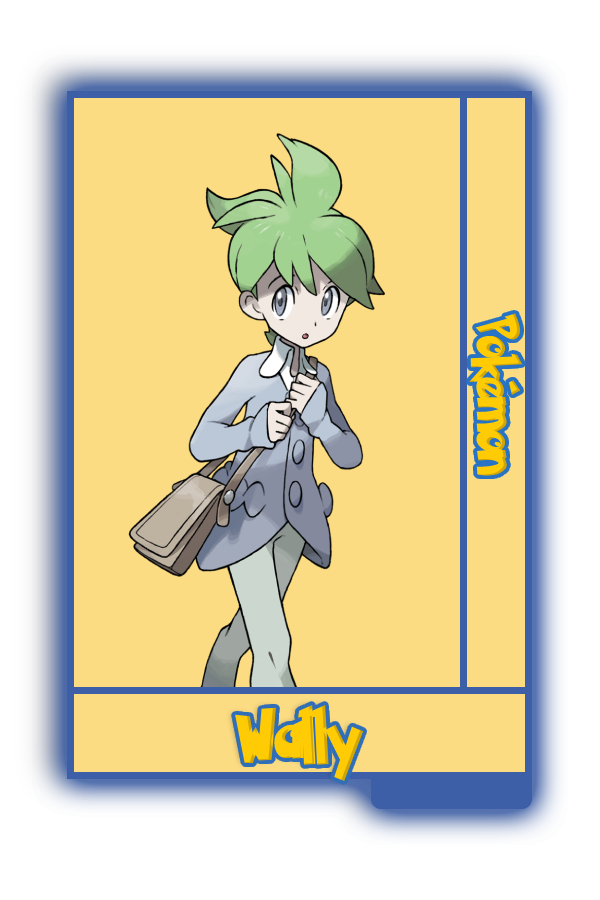
<style>
.page{position:relative;width:600px;height:900px;background:#fbdc83}
.page>*{position:absolute;margin:0}
.t1{font:48.8px "PokemonSolidNormal";color:#ffcb05;scale:0.8 1}
.t2{font:56.6px "PokemonSolidNormal";color:#ffcb05;scale:0.92 1}
</style>
<div class="page">
<p class="t1" style="left:469px;top:313px;width:54px;height:163px;rotate:90deg">Pokémon</p>
<p class="t2" style="left:235px;top:704px;width:129px;height:77px">Wally</p>
</div>
